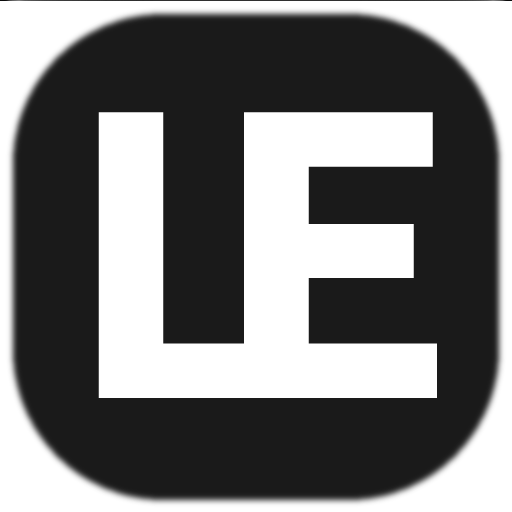
<style>
.page{position:relative;width:512px;height:512px;background:#1a1a1a}
.page>*{position:absolute;margin:0}
.t1{font:437.8px "SourceCodePro-Bold";color:#ffffff}
</style>
<div class="page">
<p class="t1" style="left:98px;top:111px;width:193px;height:286px">L</p>
<p class="t1" style="left:244px;top:111px;width:193px;height:286px">E</p>
</div>
